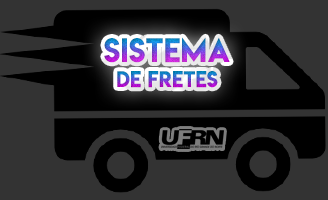
<style>
.page{position:relative;width:328px;height:200px;background:#333333}
.page>*{position:absolute;margin:0}
.t1{font:30px "LemonMilk";letter-spacing:0.02em}
.t2{font:20px "LemonMilk";letter-spacing:0.02em}
</style>
<div class="page">
<p class="t1" style="left:104px;top:37px;width:126px;height:26px">sistema</p>
<p class="t2" style="left:117px;top:71px;width:101px;height:17px">de fretes</p>
</div>
